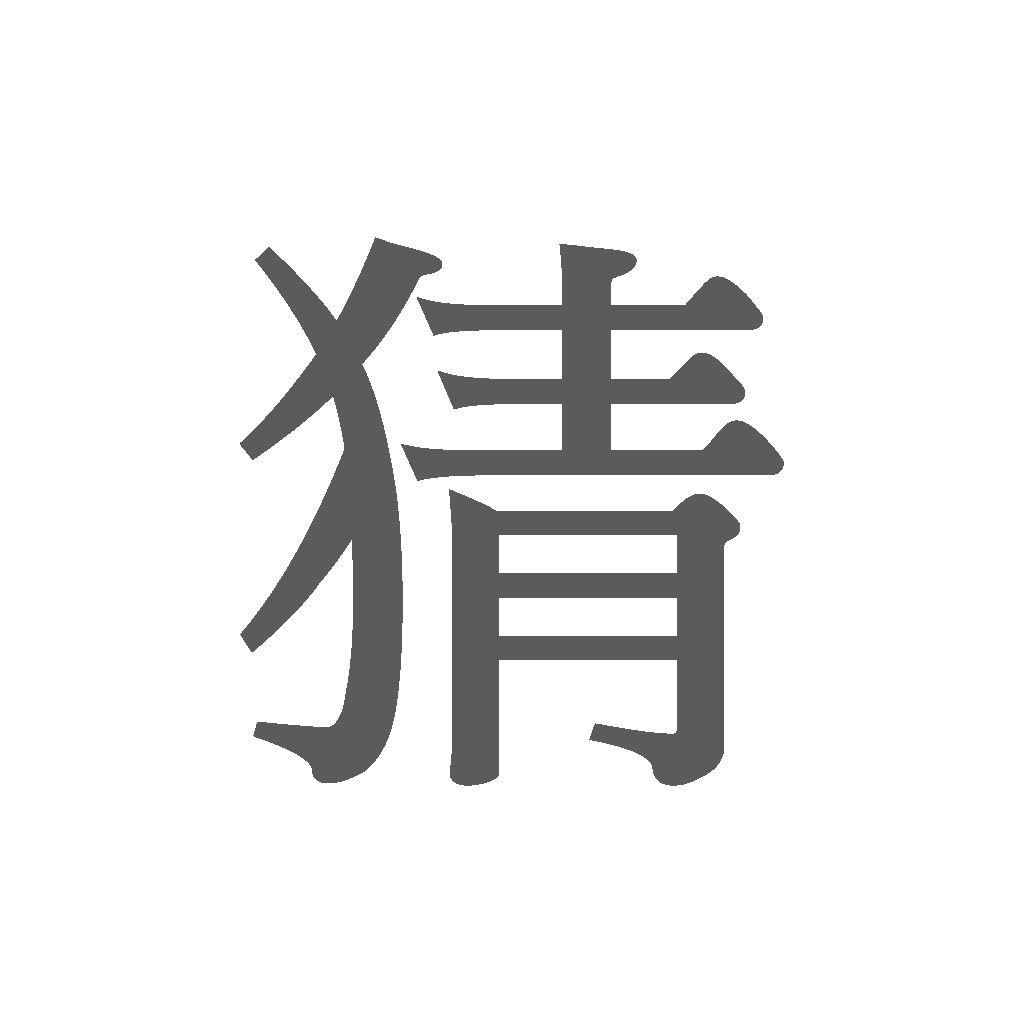
<style>
.page{position:relative;width:1024px;height:1024px;background:#ffffff}
.page>*{position:absolute;margin:0}
.t1{font:600px "SimSong-Bold";color:#5b5b5b;text-transform:uppercase}
</style>
<div class="page">
<p class="t1" style="left:240px;top:237px;width:544px;height:549px">猜</p>
</div>
